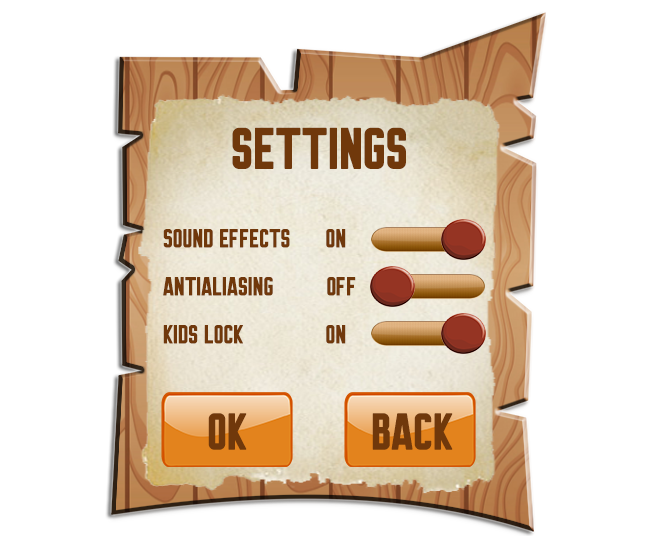
<style>
.page{position:relative;width:650px;height:536px;background:#ffffff}
.page>*{position:absolute;margin:0}
.t1{font:45px "BrewmasterGothicRound";color:#70380b}
.t2{font:20px "BrewmasterGothicRound";color:#70380b}
.t3{font:40px "BrewmasterGothicRound";color:#70380b}
</style>
<div class="page">
<p class="t1" style="left:232px;top:127px;width:174px;height:42px">settings</p>
<p class="t2" style="left:163px;top:229px;width:193px;height:115px">Sound effects      on<br><br>antialiasing         off<br><br>kids lock              on</p>
<p class="t3" style="left:208px;top:413px;width:39px;height:37px">OK</p>
<p class="t3" style="left:372px;top:413px;width:81px;height:37px">BACK</p>
</div>
